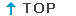
<style>
.page{position:relative;width:76px;height:16px;background:#ffffff}
.page>*{position:absolute;margin:0}
.t1{font:14px "ArialMT";letter-spacing:0.1em;color:#444444;font-weight:bold}
</style>
<div class="page">
<p class="t1" style="left:23px;top:3px;width:32px;height:10px">TOP</p>
</div>
